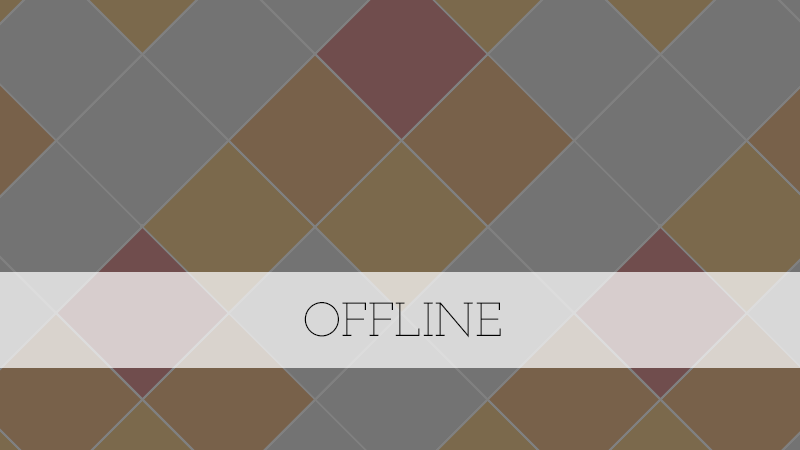
<style>
.page{position:relative;width:800px;height:450px;background:#737373}
.page>*{position:absolute;margin:0}
.t1{font:48px "JosefinSlab-Light";color:#000000}
</style>
<div class="page">
<p class="t1" style="left:304px;top:302px;width:197px;height:36px">OFFLINE</p>
</div>
